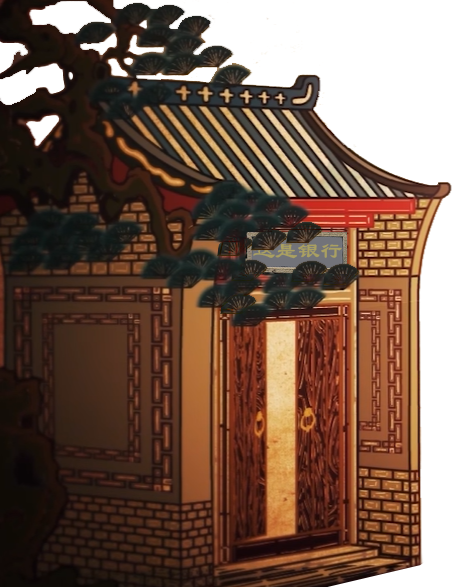
<style>
.page{position:relative;width:454px;height:587px}
.page>*{position:absolute;margin:0}
.t1{font:22.4px "LiSu";color:#aaa061}
</style>
<div class="page">
<p class="t1" style="left:253px;top:243px;width:89px;height:16px">这是银行</p>
</div>
